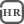
<style>
.page{position:relative;width:24px;height:24px;background:#ffffff}
.page>*{position:absolute;margin:0}
.t1{font:10px "Vani-Bold";letter-spacing:0.1em;color:#4c4c4c}
</style>
<div class="page">
<p class="t1" style="left:3px;top:9px;width:18px;height:7px">HR</p>
</div>
